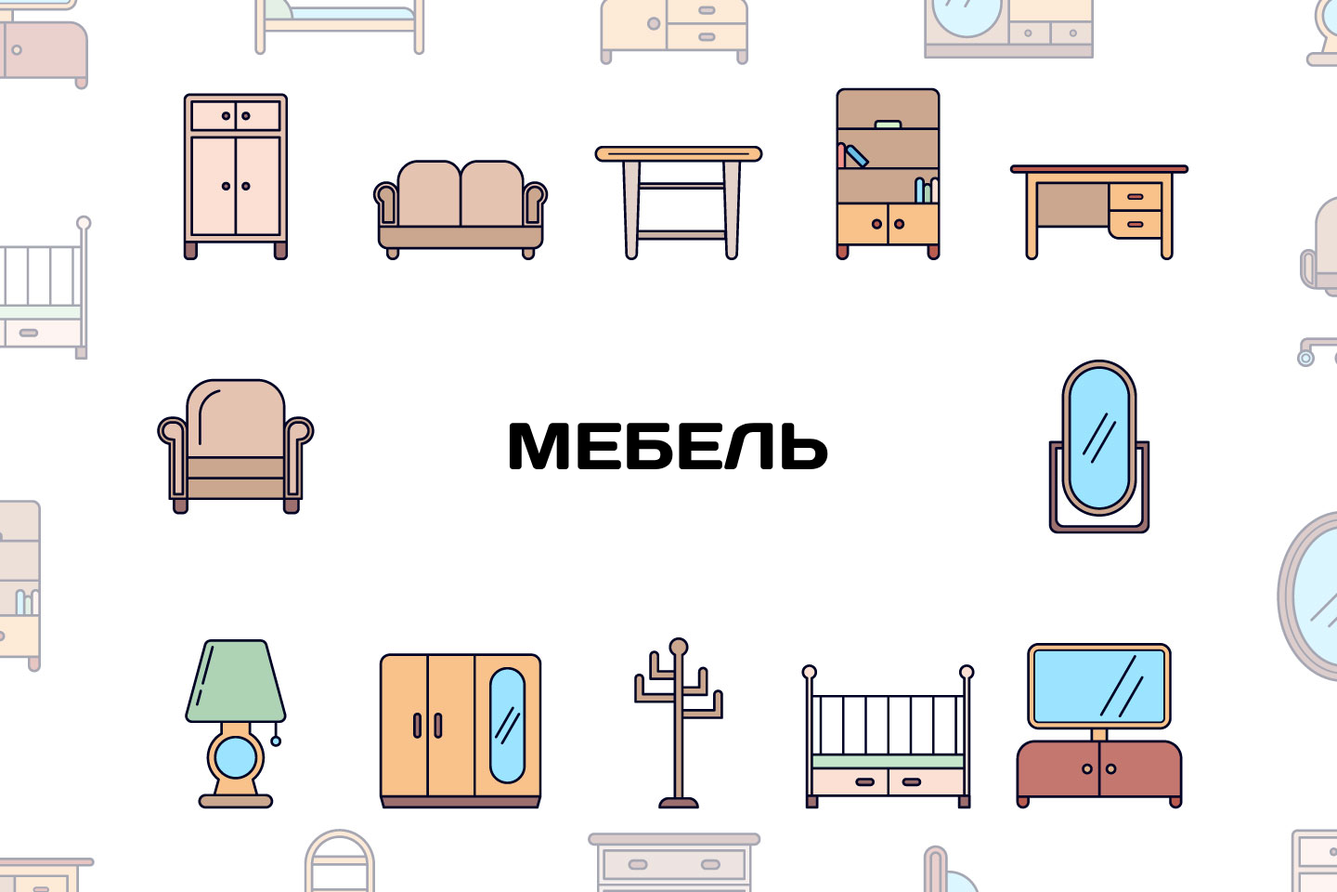
<style>
.page{position:relative;width:1337px;height:892px;background:#ffffff}
.page>*{position:absolute;margin:0}
.t1{font:65.9px "DaysOne-Regular";color:#000000}
</style>
<div class="page">
<p class="t1" style="left:509px;top:423px;width:319px;height:46px">МЕБЕЛЬ</p>
</div>
